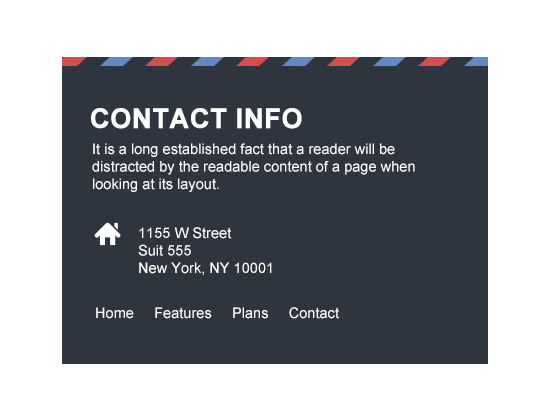
<style>
.page{position:relative;width:550px;height:417px;background:#2e353f}
.page>*{position:absolute;margin:0}
.t1{font:27.1px "Arial-BoldMT";color:#ffffff;text-transform:uppercase;font-weight:bold}
.t2{font:14.6px "ArialMT";color:#ffffff}
</style>
<div class="page">
<p class="t1" style="left:91px;top:108px;width:211px;height:21px">CONTACT INFO</p>
<p class="t2" style="left:92px;top:143px;width:323px;height:49px">It is a long established fact that a reader will be <br>distracted by the readable content of a page when <br>looking at its layout.</p>
<p class="t2" style="left:138px;top:227px;width:134px;height:49px">1155 W Street <br>Suit 555<br>New York, NY 10001</p>
<p class="t2" style="left:96px;top:307px;width:243px;height:12px">Home     Features     Plans     Contact</p>
</div>
